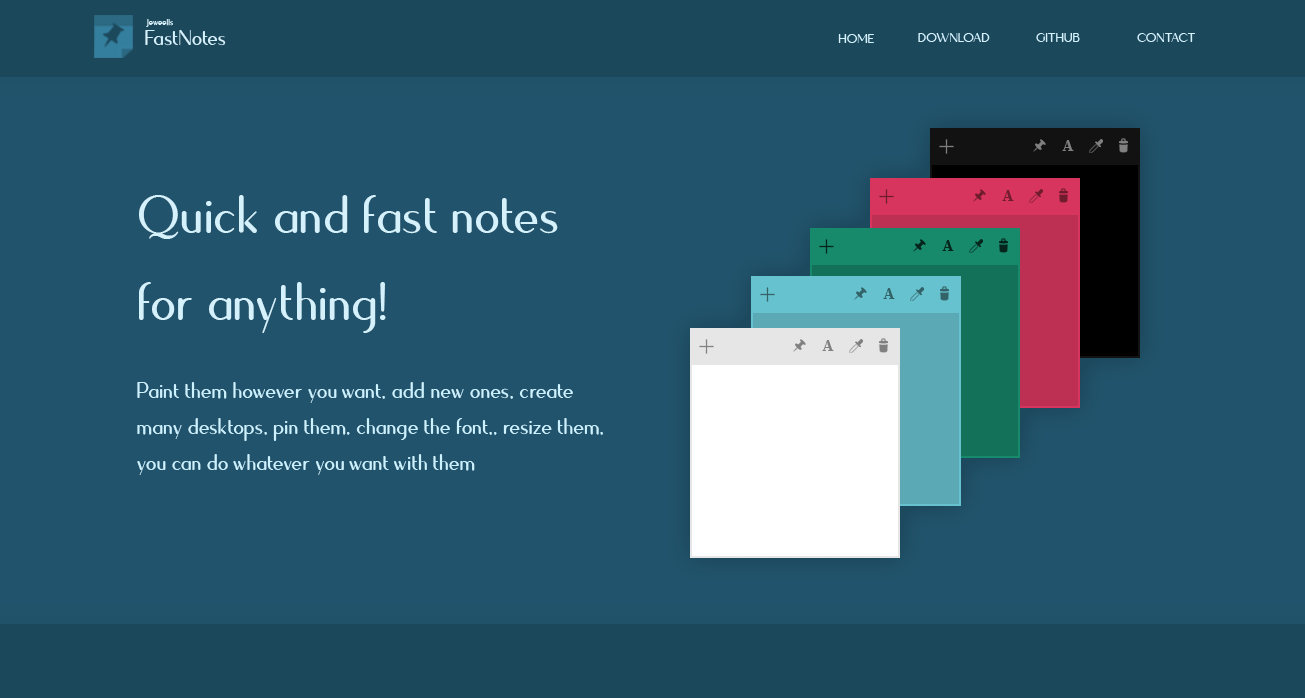
<style>
.page{position:relative;width:1305px;height:698px;background:#21546c}
.page>*{position:absolute;margin:0}
.t1{font:29px "Quesha";color:#d4f1fc}
.t2{font:12px "Quesha";color:#d4f1fc}
.t3{font:18px "Quesha";color:#d4f1fc}
.t4{font:72px "Quesha";color:#d4f1fc}
.t5{font:30px "Quesha";color:#ccf1ff}
</style>
<div class="page">
<p class="t1" style="left:145px;top:30px;width:81px;height:16px">FastNotes</p>
<p class="t2" style="left:146px;top:19px;width:27px;height:8px">Jeweells</p>
<p class="t3" style="left:838px;top:34px;width:36px;height:9px">HOME</p>
<p class="t3" style="left:918px;top:33px;width:72px;height:9px">DOWNLOAD</p>
<p class="t3" style="left:1036px;top:33px;width:44px;height:9px">GITHUB</p>
<p class="t3" style="left:1137px;top:33px;width:58px;height:9px">CONTACT</p>
<p class="t4" style="left:139px;top:195px;width:419px;height:138px">Quick and fast notes<br>for anything!</p>
<p class="t5" style="left:137px;top:382px;width:466px;height:93px">Paint them however you want, add new ones, create <br>many desktops, pin them, change the font,, resize them, <br>you can do whatever you want with them</p>
</div>
